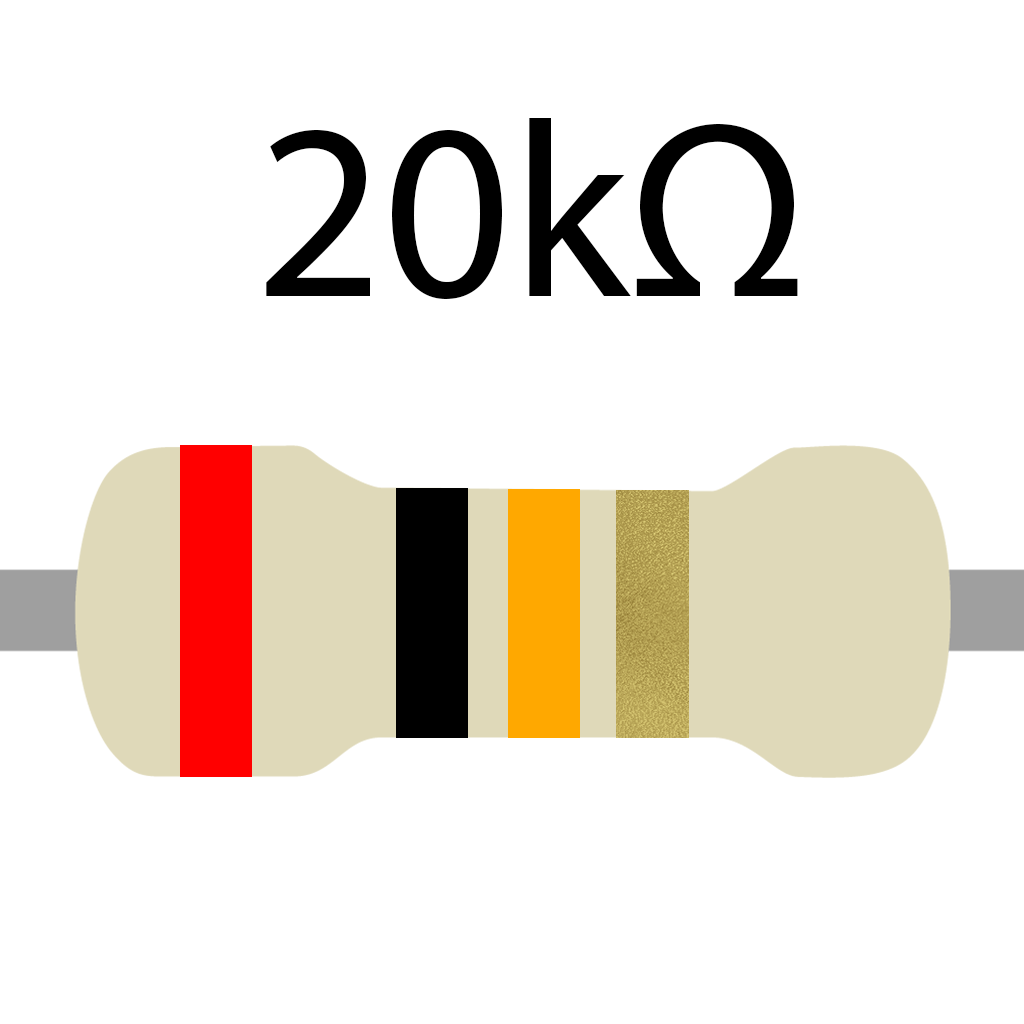
<style>
.page{position:relative;width:1024px;height:1024px;background:#ffffff}
.page>*{position:absolute;margin:0}
.t1{font:250px "MyriadPro-Regular";color:#000000}
</style>
<div class="page">
<p class="t1" style="left:266px;top:118px;width:532px;height:181px">20kΩ</p>
</div>
